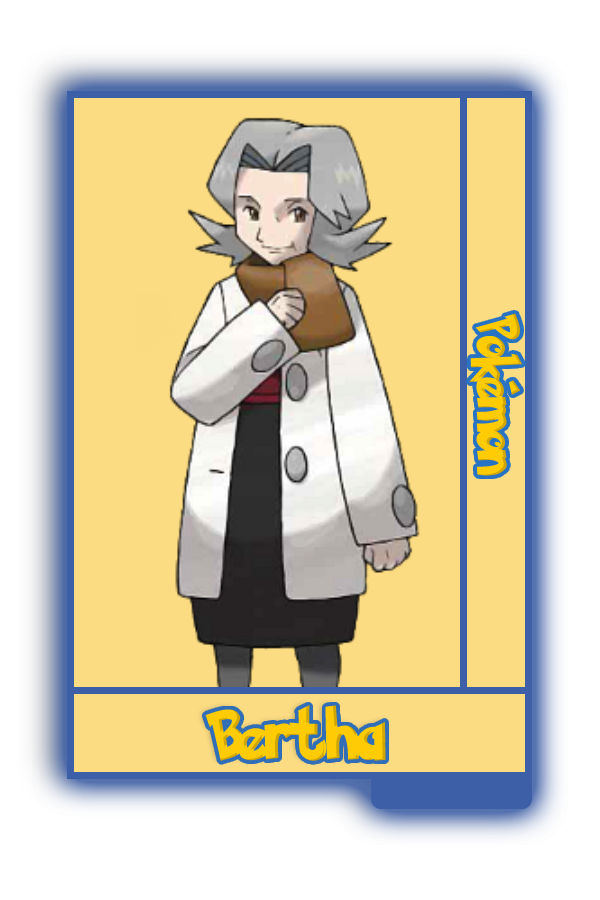
<style>
.page{position:relative;width:600px;height:900px;background:#fbdc83}
.page>*{position:absolute;margin:0}
.t1{font:48.8px "PokemonSolidNormal";color:#ffcb05;scale:0.8 1}
.t2{font:56.6px "PokemonSolidNormal";color:#ffcb05;scale:0.92 1}
</style>
<div class="page">
<p class="t1" style="left:469px;top:313px;width:54px;height:163px;rotate:90deg">Pokémon</p>
<p class="t2" style="left:205px;top:705px;width:181px;height:56px">Bertha</p>
</div>
